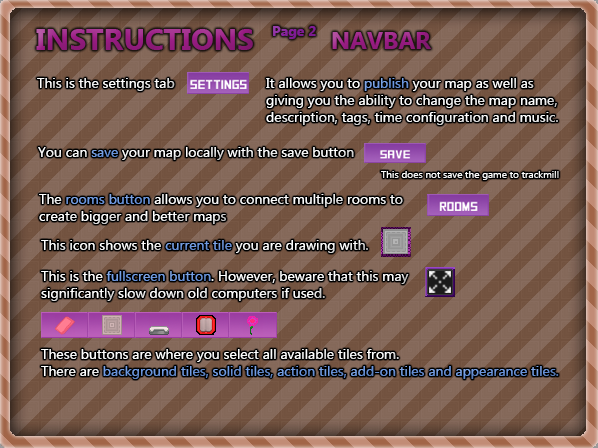
<style>
.page{position:relative;width:598px;height:448px}
.page>*{position:absolute;margin:0}
.t1{font:30px "Ebrima-Bold";color:#9b1d85}
.t2{font:14px "Ebrima-Bold";color:#851d9b}
.t3{font:24px "Ebrima-Bold";color:#9b1d85}
.t4{font:14px "Ebrima";color:#ffffff}
.t5{font:14px "Ebrima";color:#6d99e2}
.t6{font:10px "Ebrima";color:#ffffff}
</style>
<div class="page">
<p class="t1" style="left:36px;top:29px;width:217px;height:21px">INSTRUCTIONS</p>
<p class="t2" style="left:273px;top:26px;width:43px;height:13px">Page 2</p>
<p class="t3" style="left:332px;top:32px;width:99px;height:17px">NAVBAR</p>
<p class="t4" style="left:37px;top:78px;width:138px;height:13px">This is the settings tab</p>
<p class="t4" style="left:266px;top:78px;width:292px;height:47px">It allows you to <span class="t5">publish</span> your map as well as giving you the ability to change the map name, description, tags, time configuration and music.</p>
<p class="t4" style="left:38px;top:147px;width:316px;height:13px">You can<span class="t5"> save </span>your map locally with the save button</p>
<p class="t6" style="left:381px;top:171px;width:178px;height:9px">This does not save the game to trackmill</p>
<p class="t4" style="left:39px;top:194px;width:364px;height:30px">The <span class="t5">rooms button</span> allows you to connect multiple rooms to create bigger and better maps</p>
<p class="t4" style="left:41px;top:240px;width:327px;height:13px">This icon shows the <span class="t5">current tile </span>you are drawing with.</p>
<p class="t4" style="left:41px;top:271px;width:368px;height:30px">This is the <span class="t5">fullscreen button</span>. However, beware that this may<br>significantly slow down old computers if used.</p>
<p class="t5" style="left:41px;top:349px;width:518px;height:30px"><span class="t4">These buttons are where you select all available tiles from.<br>There are</span> background tiles, solid tiles, action tiles, add-on tiles and appearance tiles.</p>
</div>
